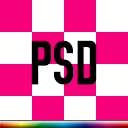
<style>
.page{position:relative;width:128px;height:128px;background:#ffffff}
.page>*{position:absolute;margin:0}
.t1{font:62.3px "OSP-DIN";color:#000000}
</style>
<div class="page">
<p class="t1" style="left:31px;top:40px;width:66px;height:45px">PSD</p>
</div>
